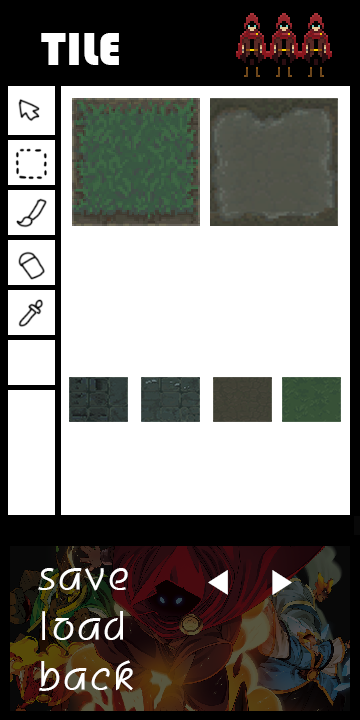
<style>
.page{position:relative;width:360px;height:720px;background:#ffffff}
.page>*{position:absolute;margin:0}
.t1{font:48px "Bauhaus93";color:#ffffff}
.t2{font:40px "H2porL";color:#ffffff}
.t3{font:32px "Gulim";color:#ffffff}
</style>
<div class="page">
<p class="t1" style="left:41px;top:33px;width:78px;height:32px">TILE</p>
<p class="t2" style="left:38px;top:568px;width:90px;height:23px">save</p>
<p class="t3" style="left:208px;top:570px;width:84px;height:25px">◀   ▶</p>
<p class="t2" style="left:42px;top:611px;width:81px;height:29px">load</p>
<p class="t2" style="left:39px;top:660px;width:94px;height:31px">back</p>
</div>
